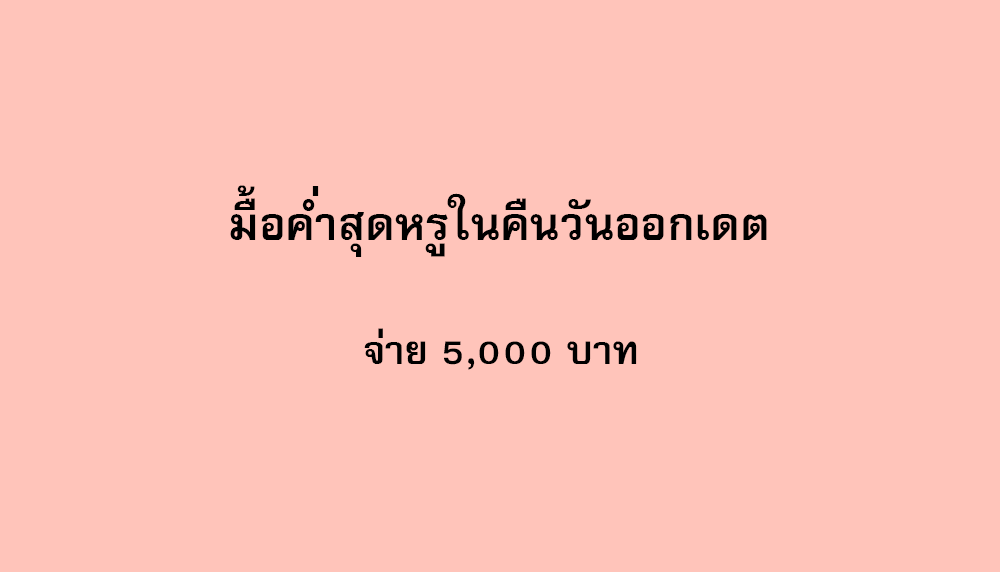
<style>
.page{position:relative;width:1000px;height:572px;background:#ffc4ba}
.page>*{position:absolute;margin:0}
.t1{font:64px "FreesiaUPCBold";color:#000000}
.t2{font:56px "FreesiaUPCBold";color:#000000}
</style>
<div class="page">
<p class="t1" style="left:230px;top:185px;width:537px;height:72px">มื้อค่ำสุดหรูในคืนวันออกเดต</p>
<p class="t2" style="left:364px;top:328px;width:273px;height:42px">จ่าย 5,000 บาท</p>
</div>
